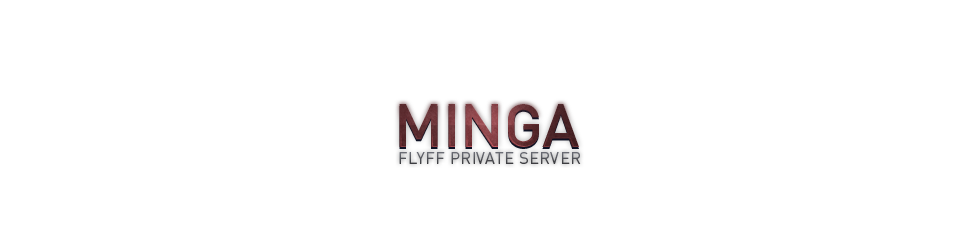
<style>
.page{position:relative;width:980px;height:250px;background:#ffffff}
.page>*{position:absolute;margin:0}
.t1{font:60px "DINPro-Medium"}
.t2{font:16px "DINPro-Regular";letter-spacing:0.04em}
</style>
<div class="page">
<p class="t1" style="left:399px;top:104px;width:180px;height:43px">MINGA</p>
<p class="t2" style="left:399px;top:152px;width:182px;height:12px">FLYFF PRIVATE SERVER</p>
</div>
